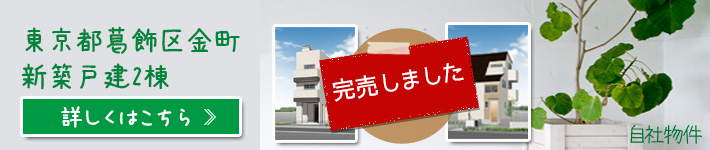
<style>
.page{position:relative;width:710px;height:150px;background:#e0e1e5}
.page>*{position:absolute;margin:0}
.t1{font:30.9px/36.1px "APJapanesefont";letter-spacing:-0.1em;color:#01843b}
.t2{font:23.8px "BokutachinoGothic";letter-spacing:-0.1em;color:#ffffff}
.t3{font:23.8px "BokutachinoGothic";letter-spacing:-0.05em;color:#ffffff}
.t4{font:27px "APJapanesefont";letter-spacing:-0.1em;color:#ffffff}
</style>
<div class="page">
<p class="t1" style="left:21px;top:26px;width:219px;height:64px">東京都葛飾区金町<br>新築戸建2棟</p>
<p class="t2" style="left:332px;top:63px;width:132px;height:39px;rotate:-9deg"><span class="t3">完売</span>しました</p>
<p class="t4" style="left:61px;top:106px;width:129px;height:22px">詳しくはこちら</p>
</div>
